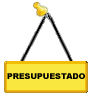
<style>
.page{position:relative;width:90px;height:100px;background:#ffffff}
.page>*{position:absolute;margin:0}
.t1{font:8px "Arial-Black";color:#000000}
</style>
<div class="page">
<p class="t1" style="left:7px;top:73px;width:78px;height:6px">PRESUPUESTADO</p>
</div>
